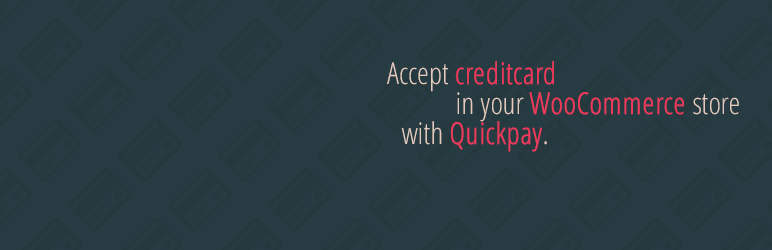
<style>
.page{position:relative;width:772px;height:250px;background:#273c42}
.page>*{position:absolute;margin:0}
.t1{font:30px/30px "OpenSans-CondensedLight";color:#ed3a5c;font-weight:bold}
.t2{font:30px/30px "OpenSans-CondensedLight";color:#e3cbbf}
</style>
<div class="page">
<p class="t1" style="left:387px;top:61px;width:352px;height:91px;text-align:center"><span class="t2">Accept </span>creditcard <br><span class="t2">       in your </span>WooCommerce<span class="t2"> store <br>with </span>Quickpay<span class="t2">.</span></p>
</div>
